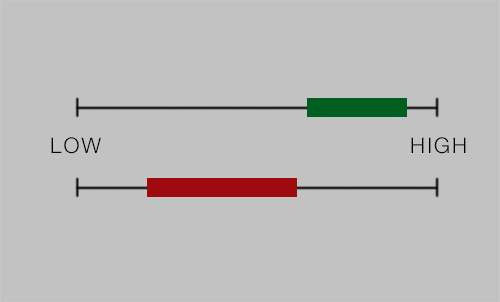
<style>
.page{position:relative;width:500px;height:302px;background:#c2c2c2}
.page>*{position:absolute;margin:0}
.t1{font:21.6px "HelveticaNeue-Light";letter-spacing:0.09em;color:#000000}
</style>
<div class="page">
<p class="t1" style="left:51px;top:137px;width:50px;height:17px">LOW</p>
<p class="t1" style="left:411px;top:137px;width:55px;height:17px">HIGH</p>
</div>
